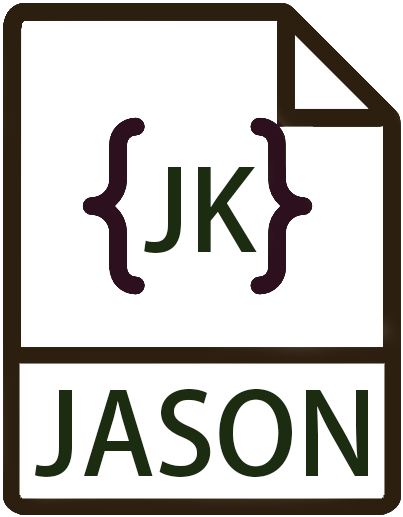
<style>
.page{position:relative;width:403px;height:517px;background:#ffffff}
.page>*{position:absolute;margin:0}
.t1{font:111.5px "AdobeHeitiStd-Regular";color:#1c2c10}
.t2{font:112.4px "AdobeHeitiStd-Regular";color:#1c2c10}
</style>
<div class="page">
<p class="t1" style="left:144px;top:167px;width:113px;height:86px">JK</p>
<p class="t2" style="left:35px;top:388px;width:333px;height:89px">JASON</p>
</div>
